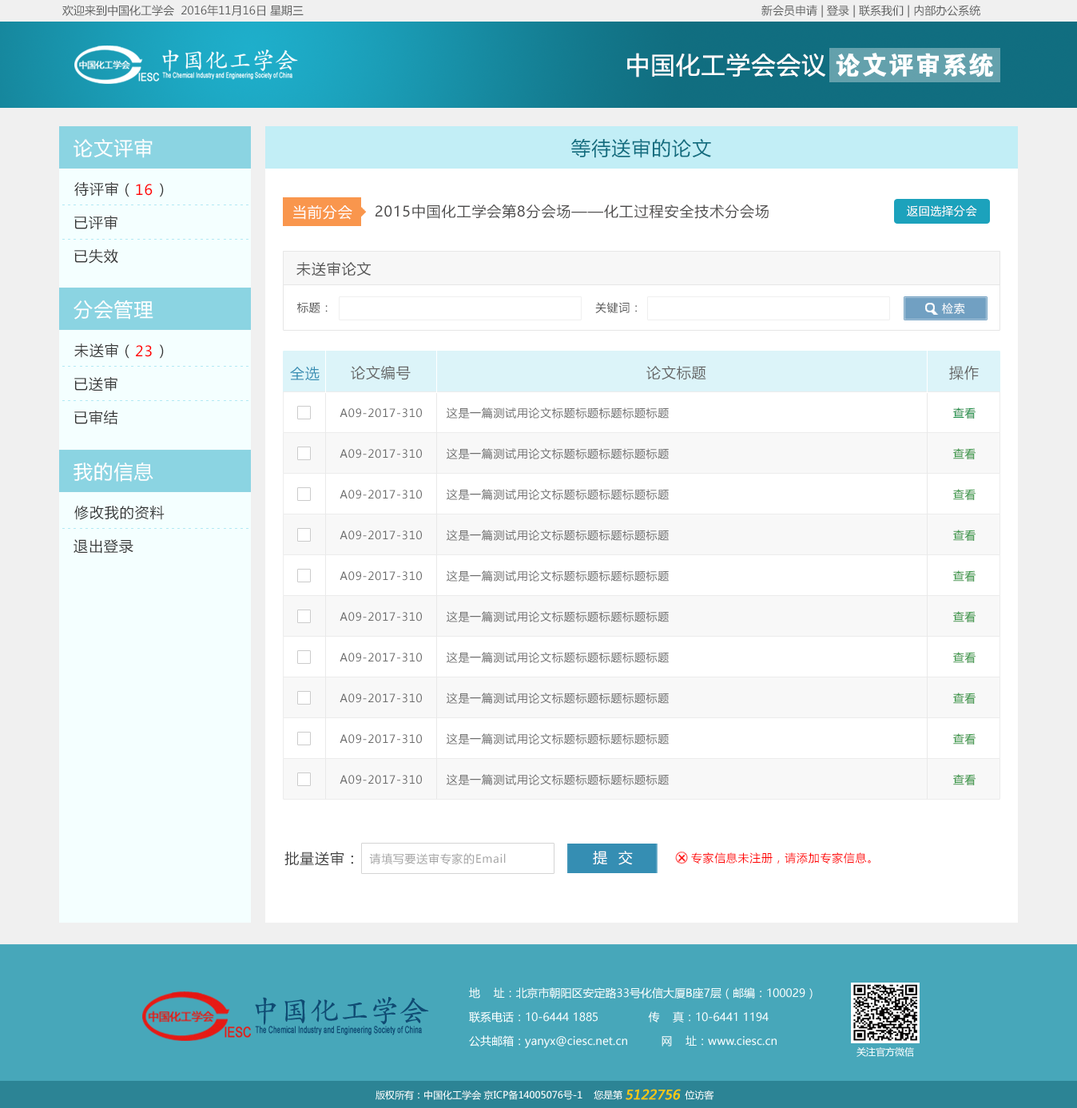
<style>
.page{position:relative;width:1077px;height:1108px;background:#ffffff}
.page>*{position:absolute;margin:0}
.t1{font:11.2px "MicrosoftYaHei";color:#5d5e5e}
.t2{font:24px "MicrosoftYaHei";letter-spacing:0.05em;color:#ffffff}
.t3{font:25.4px "FZDHTJW--GB1-0";letter-spacing:0.05em;color:#ffffff}
.t4{font:19.2px "MicrosoftYaHei";letter-spacing:0.05em;color:#ffffff}
.t5{font:19.2px "MicrosoftYaHei";letter-spacing:0.05em;color:#116e80}
.t6{font:14.4px "MicrosoftYaHei";letter-spacing:0.05em;color:#363636}
.t7{font:14.4px "MicrosoftYaHei";letter-spacing:0.05em;color:#ff0000}
.t8{font:6.4px "SimSun";letter-spacing:0.4em;color:#b2e9f4}
.t9{font:14.4px "MicrosoftYaHei";letter-spacing:0.05em;color:#ffffff}
.t10{font:14.4px "MicrosoftYaHei";letter-spacing:0.05em;color:#4e4d4d}
.t11{font:11.2px "MicrosoftYaHei";letter-spacing:0.05em;color:#ffffff}
.t12{font:14.4px "MicrosoftYaHei";letter-spacing:0.05em;color:#515151}
.t13{font:11.2px "MicrosoftYaHei";letter-spacing:0.05em;color:#515151}
.t14{font:14.4px "MicrosoftYaHei";letter-spacing:0.05em;color:#358eb3}
.t15{font:14.4px "MicrosoftYaHei";letter-spacing:0.05em;color:#656565}
.t16{font:11.2px "MicrosoftYaHei";letter-spacing:0.05em;color:#6c6c6c}
.t17{font:11.2px "MicrosoftYaHei";letter-spacing:0.05em;color:#188c44}
.t18{font:11.2px "MicrosoftYaHei";letter-spacing:0.05em;color:#2d913c}
.t19{font:14.4px "MicrosoftYaHei";letter-spacing:0.05em;color:#3d3d3d}
.t20{font:11.2px "MicrosoftYaHei";letter-spacing:0.05em;color:#a3a3a3}
.t21{font:11.2px "MicrosoftYaHei";letter-spacing:0.05em;color:#ff0000}
.t22{font:11.2px/24px "MicrosoftYaHei";color:#f4ffff}
.t23{font:9.6px "MicrosoftYaHei";color:#f4ffff}
.t24{font:12.8px "MicrosoftYaHei";color:#ffcc00;font-weight:bold;font-style:italic}
</style>
<div class="page">
<p class="t1" style="left:62px;top:5px;width:241px;height:11px">欢迎来到中国化工学会  2016年11月16日 星期三</p>
<p class="t1" style="left:761px;top:5px;width:219px;height:13px">新会员申请 | 登录 | 联系我们 | 内部办公系统</p>
<p class="t2" style="left:627px;top:53px;width:198px;height:24px">中国化工学会会议</p>
<p class="t3" style="left:835px;top:53px;width:158px;height:24px">论文评审系统</p>
<p class="t4" style="left:73px;top:138px;width:80px;height:20px">论文评审</p>
<p class="t5" style="left:571px;top:138px;width:140px;height:20px">等待送审的论文</p>
<p class="t6" style="left:74px;top:181px;width:90px;height:16px">待评审（    ）</p>
<p class="t7" style="left:136px;top:184px;width:17px;height:12px">16</p>
<p class="t8" style="left:62px;top:204px;width:186px;height:1px">---------------------------------</p>
<p class="t9" style="left:293px;top:205px;width:59px;height:15px">当前分会</p>
<p class="t10" style="left:375px;top:204px;width:393px;height:15px">2015中国化工学会第8分会场——化工过程安全技术分会场</p>
<p class="t11" style="left:906px;top:205px;width:71px;height:11px">返回选择分会</p>
<p class="t6" style="left:74px;top:215px;width:43px;height:15px">已评审</p>
<p class="t8" style="left:62px;top:239px;width:186px;height:1px">---------------------------------</p>
<p class="t6" style="left:74px;top:249px;width:44px;height:15px">已失效</p>
<p class="t12" style="left:296px;top:261px;width:75px;height:15px">未送审论文</p>
<p class="t4" style="left:73px;top:300px;width:80px;height:19px">分会管理</p>
<p class="t13" style="left:297px;top:302px;width:30px;height:11px">标题：</p>
<p class="t13" style="left:595px;top:302px;width:41px;height:11px">关键词：</p>
<p class="t11" style="left:942px;top:303px;width:23px;height:11px">检索</p>
<p class="t6" style="left:74px;top:343px;width:90px;height:16px">未送审（    ）</p>
<p class="t7" style="left:136px;top:345px;width:16px;height:12px">23</p>
<p class="t8" style="left:62px;top:366px;width:186px;height:1px">---------------------------------</p>
<p class="t14" style="left:290px;top:366px;width:29px;height:14px">全选</p>
<p class="t15" style="left:351px;top:365px;width:59px;height:15px">论文编号</p>
<p class="t15" style="left:646px;top:366px;width:60px;height:14px">论文标题</p>
<p class="t15" style="left:949px;top:366px;width:29px;height:14px">操作</p>
<p class="t6" style="left:74px;top:376px;width:43px;height:15px">已送审</p>
<p class="t8" style="left:62px;top:400px;width:186px;height:1px">---------------------------------</p>
<p class="t6" style="left:74px;top:410px;width:44px;height:15px">已审结</p>
<p class="t16" style="left:339px;top:408px;width:83px;height:10px">A09-2017-310</p>
<p class="t16" style="left:446px;top:407px;width:222px;height:11px">这是一篇测试用论文标题标题标题标题标题</p>
<p class="t17" style="left:953px;top:407px;width:22px;height:11px">查看</p>
<p class="t16" style="left:339px;top:449px;width:83px;height:9px">A09-2017-310</p>
<p class="t16" style="left:446px;top:448px;width:222px;height:11px">这是一篇测试用论文标题标题标题标题标题</p>
<p class="t18" style="left:953px;top:448px;width:22px;height:11px">查看</p>
<p class="t4" style="left:73px;top:462px;width:80px;height:20px">我的信息</p>
<p class="t16" style="left:339px;top:490px;width:83px;height:9px">A09-2017-310</p>
<p class="t16" style="left:446px;top:489px;width:222px;height:11px">这是一篇测试用论文标题标题标题标题标题</p>
<p class="t18" style="left:953px;top:489px;width:22px;height:11px">查看</p>
<p class="t6" style="left:74px;top:506px;width:91px;height:14px">修改我的资料</p>
<p class="t8" style="left:62px;top:528px;width:186px;height:1px">---------------------------------</p>
<p class="t16" style="left:339px;top:530px;width:83px;height:10px">A09-2017-310</p>
<p class="t16" style="left:446px;top:529px;width:222px;height:12px">这是一篇测试用论文标题标题标题标题标题</p>
<p class="t18" style="left:953px;top:529px;width:22px;height:12px">查看</p>
<p class="t6" style="left:73px;top:539px;width:60px;height:14px">退出登录</p>
<p class="t16" style="left:339px;top:571px;width:83px;height:10px">A09-2017-310</p>
<p class="t16" style="left:446px;top:570px;width:222px;height:11px">这是一篇测试用论文标题标题标题标题标题</p>
<p class="t18" style="left:953px;top:570px;width:22px;height:11px">查看</p>
<p class="t16" style="left:339px;top:612px;width:83px;height:9px">A09-2017-310</p>
<p class="t16" style="left:446px;top:611px;width:222px;height:11px">这是一篇测试用论文标题标题标题标题标题</p>
<p class="t18" style="left:953px;top:611px;width:22px;height:11px">查看</p>
<p class="t16" style="left:339px;top:652px;width:83px;height:10px">A09-2017-310</p>
<p class="t16" style="left:446px;top:652px;width:222px;height:11px">这是一篇测试用论文标题标题标题标题标题</p>
<p class="t18" style="left:953px;top:652px;width:22px;height:11px">查看</p>
<p class="t16" style="left:339px;top:693px;width:83px;height:10px">A09-2017-310</p>
<p class="t16" style="left:446px;top:692px;width:222px;height:12px">这是一篇测试用论文标题标题标题标题标题</p>
<p class="t18" style="left:953px;top:692px;width:22px;height:12px">查看</p>
<p class="t16" style="left:339px;top:734px;width:83px;height:10px">A09-2017-310</p>
<p class="t16" style="left:446px;top:733px;width:222px;height:11px">这是一篇测试用论文标题标题标题标题标题</p>
<p class="t18" style="left:953px;top:733px;width:22px;height:11px">查看</p>
<p class="t16" style="left:446px;top:774px;width:222px;height:11px">这是一篇测试用论文标题标题标题标题标题</p>
<p class="t18" style="left:953px;top:774px;width:22px;height:11px">查看</p>
<p class="t16" style="left:339px;top:775px;width:83px;height:9px">A09-2017-310</p>
<p class="t19" style="left:284px;top:851px;width:69px;height:15px">批量送审：</p>
<p class="t20" style="left:369px;top:853px;width:137px;height:11px">请填写要送审专家的Email</p>
<p class="t9" style="left:593px;top:851px;width:39px;height:14px">提  交</p>
<p class="t21" style="left:691px;top:852px;width:179px;height:11px">专家信息未注册，请添加专家信息。</p>
<p class="t22" style="left:469px;top:987px;width:343px;height:61px">地    址：北京市朝阳区安定路33号化信大厦B座7层（邮编：100029）<br>联系电话：10-6444 1885               传    真：10-6441 1194<br>公共邮箱：yanyx@ciesc.net.cn          网    址：www.ciesc.cn</p>
<p class="t23" style="left:856px;top:1047px;width:58px;height:10px">关注官方微信</p>
<p class="t23" style="left:375px;top:1089px;width:339px;height:11px">版权所有：中国化工学会 京ICP备14005076号-1    您是第                      位访客</p>
<p class="t24" style="left:625px;top:1089px;width:55px;height:11px">5122756</p>
</div>
